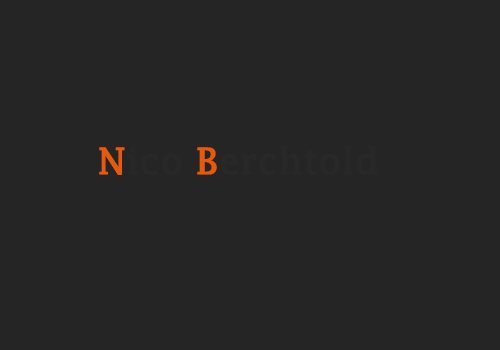
<style>
.page{position:relative;width:500px;height:350px;background:#252525}
.page>*{position:absolute;margin:0}
.t1{font:36px "LucidaFax";color:#282828;font-weight:bold}
.t2{font:36px "LucidaFax";color:#e7590b;font-weight:bold}
</style>
<div class="page">
<p class="t1" style="left:99px;top:145px;width:279px;height:30px"><span class="t2">N</span>ico <span class="t2">B</span>erchtold</p>
</div>
